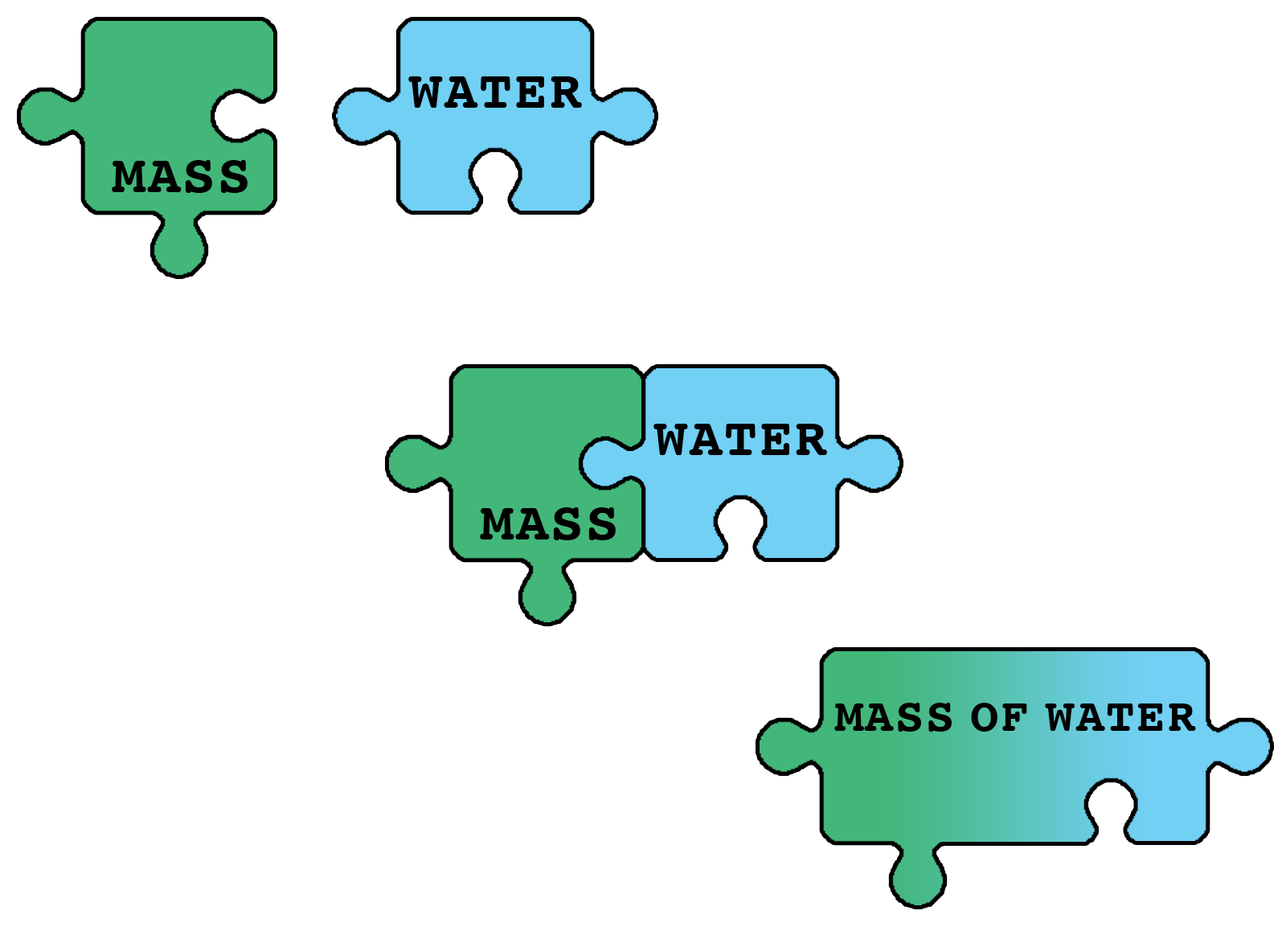
<style>
.page{position:relative;width:1286px;height:927px;background:#ffffff}
.page>*{position:absolute;margin:0}
.t1{font:55px "Courier-Bold";letter-spacing:0.035em;color:#000000}
.t2{font:47.8px "Courier-Bold";letter-spacing:0.035em;color:#000000}
</style>
<div class="page">
<p class="t1" style="left:408px;top:76px;width:174px;height:32px">WATER</p>
<p class="t1" style="left:112px;top:160px;width:136px;height:33px">MASS</p>
<p class="t1" style="left:654px;top:424px;width:173px;height:31px">WATER</p>
<p class="t1" style="left:480px;top:507px;width:136px;height:33px">MASS</p>
<p class="t2" style="left:835px;top:703px;width:361px;height:29px">MASS OF WATER</p>
</div>
